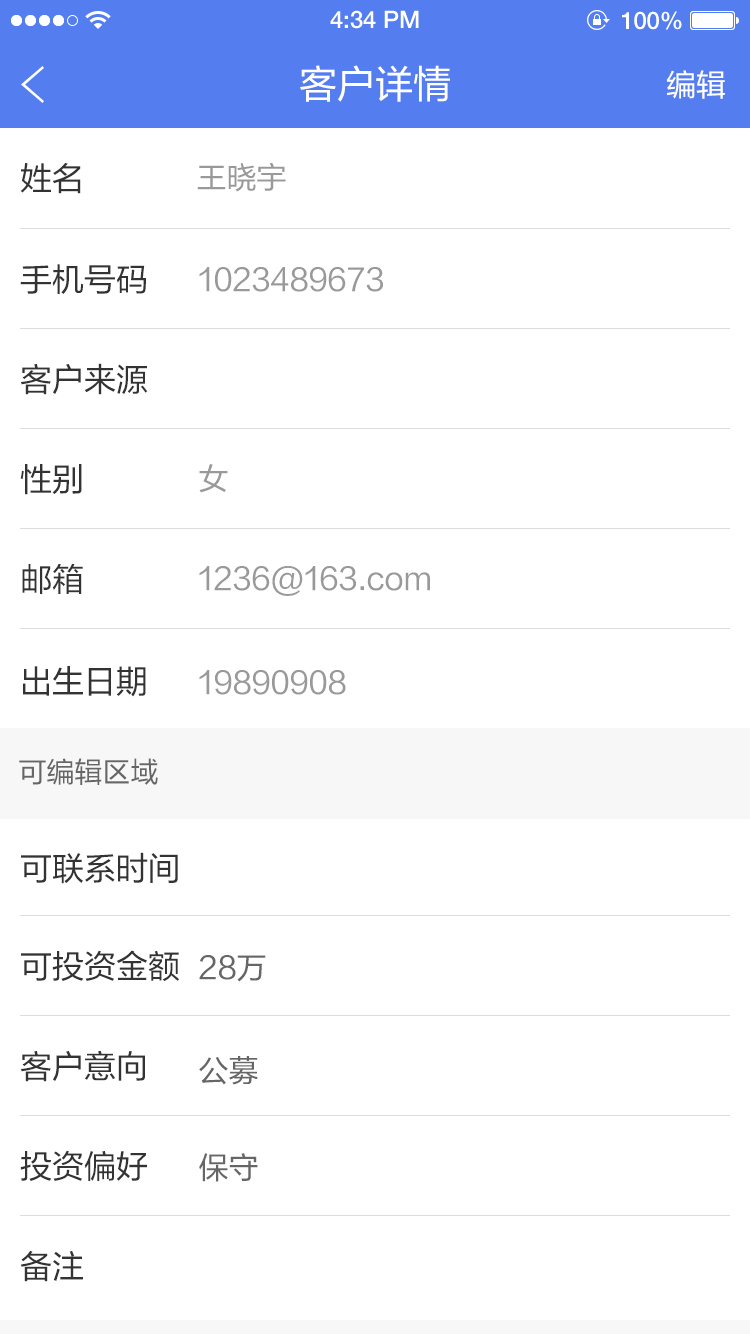
<style>
.page{position:relative;width:750px;height:1334px;background:#ffffff}
.page>*{position:absolute;margin:0}
.t1{font:24px "HelveticaNeueLTPro-Md";color:#ffffff}
.t2{font:38px "FZLTHJW-GB1-0";color:#ffffff}
.t3{font:30px "FZLTHJW-GB1-0";color:#ffffff}
.t4{font:32px "FZLTHJW-GB1-0";color:#333333}
.t5{font:30px "FZLTHJW-GB1-0";color:#999999}
.t6{font:28px "FZLTHJW-GB1-0";color:#666666}
.t7{font:30px "FZLTHJW-GB1-0";color:#666666}
</style>
<div class="page">
<p class="t1" style="left:330px;top:10px;width:89px;height:19px">4:34 PM</p>
<p class="t1" style="left:622px;top:11px;width:60px;height:19px">100%</p>
<p class="t2" style="left:300px;top:65px;width:150px;height:37px">客户详情</p>
<p class="t3" style="left:666px;top:70px;width:59px;height:29px">编辑</p>
<p class="t4" style="left:20px;top:163px;width:61px;height:31px">姓名</p>
<p class="t5" style="left:197px;top:162px;width:89px;height:30px">王晓宇</p>
<p class="t4" style="left:20px;top:264px;width:126px;height:30px">手机号码</p>
<p class="t5" style="left:199px;top:267px;width:184px;height:25px">1023489673</p>
<p class="t4" style="left:20px;top:363px;width:128px;height:32px">客户来源</p>
<p class="t4" style="left:20px;top:464px;width:62px;height:31px">性别</p>
<p class="t5" style="left:199px;top:464px;width:29px;height:29px">女</p>
<p class="t4" style="left:22px;top:563px;width:61px;height:31px">邮箱</p>
<p class="t5" style="left:199px;top:566px;width:231px;height:30px">1236@163.com</p>
<p class="t4" style="left:23px;top:666px;width:123px;height:31px">出生日期</p>
<p class="t5" style="left:199px;top:670px;width:147px;height:25px">19890908</p>
<p class="t6" style="left:19px;top:758px;width:139px;height:27px">可编辑区域</p>
<p class="t4" style="left:21px;top:852px;width:157px;height:32px">可联系时间</p>
<p class="t4" style="left:21px;top:950px;width:158px;height:32px">可投资金额</p>
<p class="t7" style="left:199px;top:955px;width:67px;height:27px">28万</p>
<p class="t4" style="left:20px;top:1050px;width:125px;height:32px">客户意向</p>
<p class="t7" style="left:199px;top:1056px;width:59px;height:29px">公募</p>
<p class="t4" style="left:20px;top:1150px;width:127px;height:31px">投资偏好</p>
<p class="t7" style="left:199px;top:1153px;width:59px;height:29px">保守</p>
<p class="t4" style="left:20px;top:1251px;width:63px;height:31px">备注</p>
</div>
